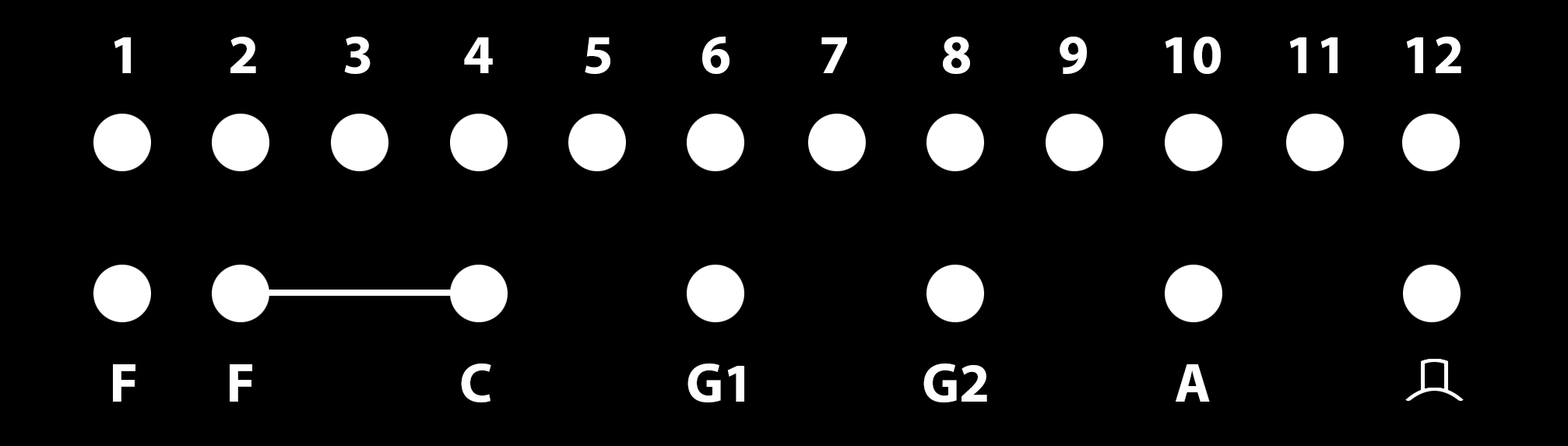
<style>
.page{position:relative;width:1568px;height:446px;background:#000000}
.page>*{position:absolute;margin:0}
.t1{font:55.2px "MyriadPro-Bold";color:#ffffff}
</style>
<div class="page">
<p class="t1" style="left:114px;top:37px;width:17px;height:36px">1</p>
<p class="t1" style="left:230px;top:37px;width:26px;height:36px">2</p>
<p class="t1" style="left:344px;top:37px;width:27px;height:37px">3</p>
<p class="t1" style="left:464px;top:37px;width:29px;height:36px">4</p>
<p class="t1" style="left:585px;top:37px;width:25px;height:37px">5</p>
<p class="t1" style="left:702px;top:37px;width:28px;height:37px">6</p>
<p class="t1" style="left:821px;top:37px;width:26px;height:36px">7</p>
<p class="t1" style="left:943px;top:37px;width:27px;height:37px">8</p>
<p class="t1" style="left:1060px;top:37px;width:27px;height:37px">9</p>
<p class="t1" style="left:1165px;top:37px;width:56px;height:37px">10</p>
<p class="t1" style="left:1289px;top:37px;width:49px;height:36px">11</p>
<p class="t1" style="left:1406px;top:37px;width:55px;height:36px">12</p>
<p class="t1" style="left:113px;top:364px;width:22px;height:38px">F</p>
<p class="t1" style="left:230px;top:364px;width:22px;height:38px">F</p>
<p class="t1" style="left:461px;top:364px;width:30px;height:39px">C</p>
<p class="t1" style="left:687px;top:364px;width:57px;height:39px">G1</p>
<p class="t1" style="left:923px;top:364px;width:64px;height:39px">G2</p>
<p class="t1" style="left:1176px;top:364px;width:34px;height:38px">A</p>
</div>
